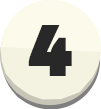
<style>
.page{position:relative;width:101px;height:109px;background:#fcfbeb}
.page>*{position:absolute;margin:0}
.t1{font:72px "MovaviGrotesqueBlack";color:#282828}
</style>
<div class="page">
<p class="t1" style="left:28px;top:25px;width:44px;height:51px">4</p>
</div>
